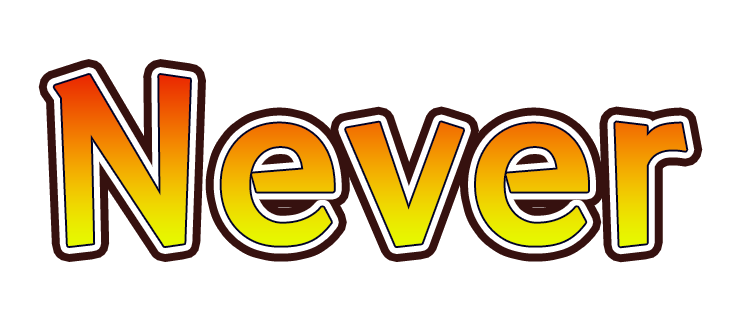
<style>
.page{position:relative;width:740px;height:322px;background:#ffffff}
.page>*{position:absolute;margin:0}
.t1{font:208.3px "RocknRollOne-Regular";font-weight:bold}
</style>
<div class="page">
<p class="t1" style="left:54px;top:75px;width:633px;height:172px">Never</p>
</div>
